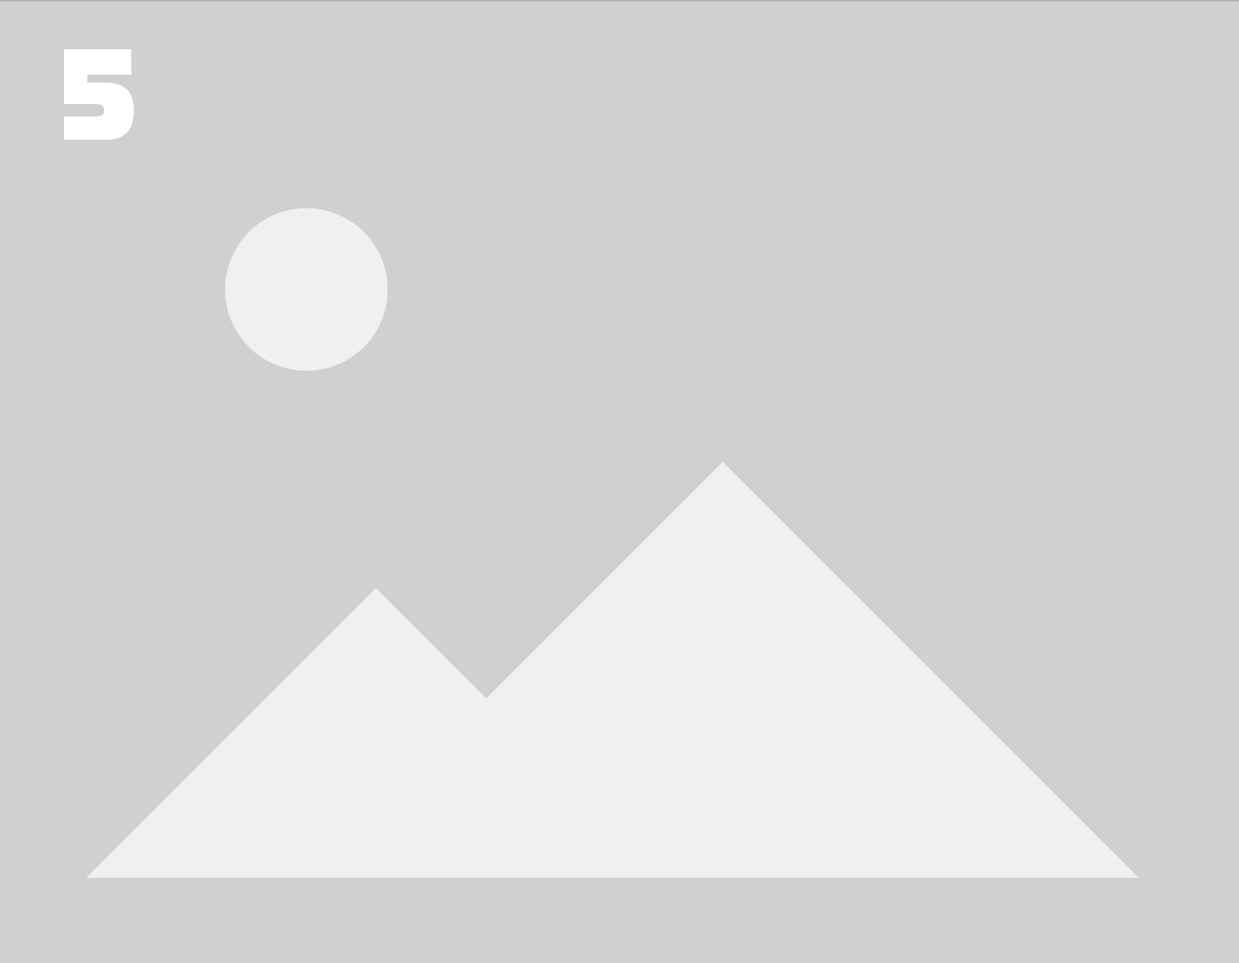
<style>
.page{position:relative;width:1239px;height:963px;background:#d0d0d0}
.page>*{position:absolute;margin:0}
.t1{font:129.7px "Alfarn2";color:#ffffff}
</style>
<div class="page">
<p class="t1" style="left:64px;top:48px;width:70px;height:92px">5</p>
</div>
